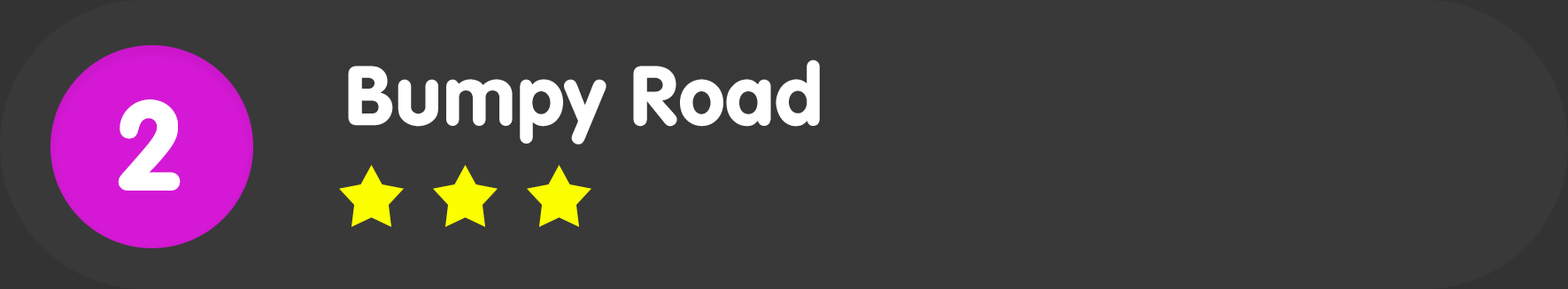
<style>
.page{position:relative;width:1568px;height:289px;background:#393939}
.page>*{position:absolute;margin:0}
.t1{font:88.5px "VAGRundschriftD";color:#ffffff}
.t2{font:132.8px "VAGRundschriftD";color:#ffffff}
</style>
<div class="page">
<p class="t1" style="left:348px;top:59px;width:472px;height:85px">Bumpy Road</p>
<p class="t2" style="left:118px;top:99px;width:63px;height:91px">2</p>
</div>
